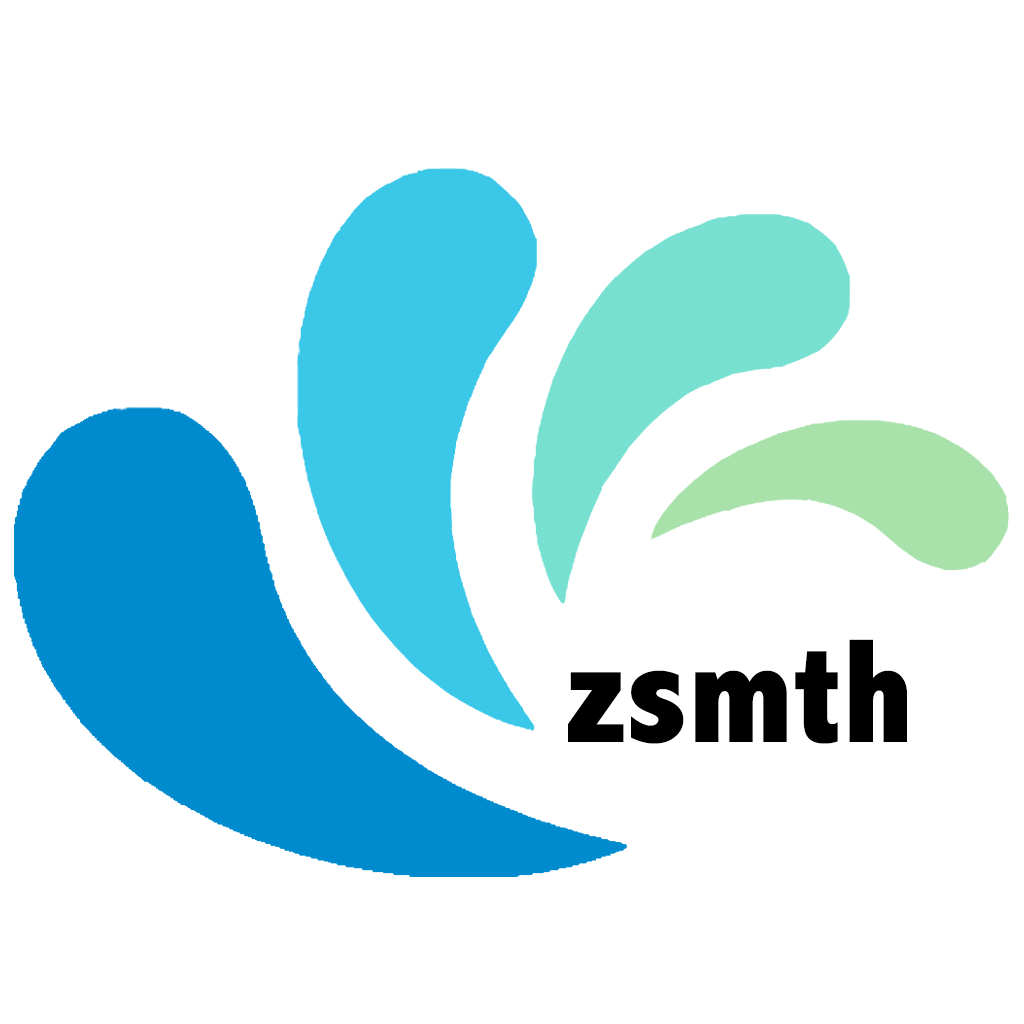
<style>
.page{position:relative;width:1024px;height:1024px;background:#ffffff}
.page>*{position:absolute;margin:0}
.t1{font:150px "AbadiMT-CondensedExtraBold";color:#000000}
</style>
<div class="page">
<p class="t1" style="left:568px;top:639px;width:339px;height:105px">zsmth</p>
</div>
